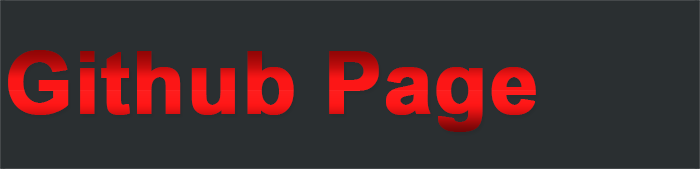
<style>
.page{position:relative;width:700px;height:169px;background:#2a2f31}
.page>*{position:absolute;margin:0}
.t1{font:86px "Arial-BoldMT";font-weight:bold}
</style>
<div class="page">
<p class="t1" style="left:8px;top:50px;width:528px;height:82px">Github Page</p>
</div>
